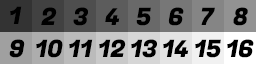
<style>
.page{position:relative;width:256px;height:64px}
.page>*{position:absolute;margin:0}
.t1{font:24px "FugazOne-Regular";color:#000000}
</style>
<div class="page">
<p class="t1" style="left:10px;top:6px;width:12px;height:18px">1</p>
<p class="t1" style="left:41px;top:7px;width:16px;height:18px">2</p>
<p class="t1" style="left:73px;top:7px;width:15px;height:19px">3</p>
<p class="t1" style="left:105px;top:8px;width:15px;height:17px">4</p>
<p class="t1" style="left:136px;top:7px;width:15px;height:19px">5</p>
<p class="t1" style="left:168px;top:7px;width:16px;height:19px">6</p>
<p class="t1" style="left:201px;top:7px;width:14px;height:18px">7</p>
<p class="t1" style="left:233px;top:7px;width:15px;height:19px">8</p>
<p class="t1" style="left:9px;top:39px;width:16px;height:19px">9</p>
<p class="t1" style="left:36px;top:39px;width:27px;height:19px">10</p>
<p class="t1" style="left:69px;top:39px;width:24px;height:18px">11</p>
<p class="t1" style="left:99px;top:39px;width:27px;height:18px">12</p>
<p class="t1" style="left:131px;top:39px;width:26px;height:19px">13</p>
<p class="t1" style="left:163px;top:39px;width:26px;height:18px">14</p>
<p class="t1" style="left:195px;top:39px;width:26px;height:19px">15</p>
<p class="t1" style="left:227px;top:39px;width:27px;height:19px">16</p>
</div>
